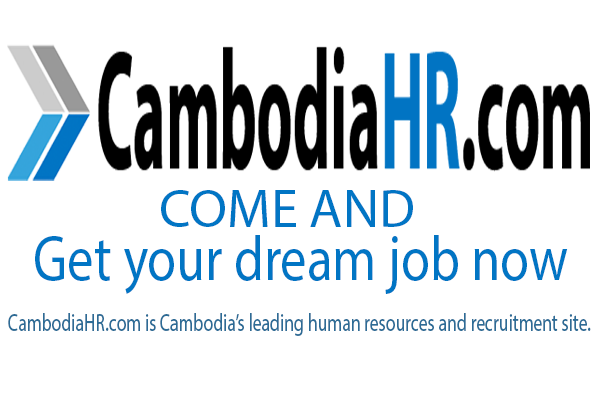
<style>
.page{position:relative;width:600px;height:400px;background:#ffffff}
.page>*{position:absolute;margin:0}
.t1{font:53.4px "MyriadPro-Regular";color:#0175c4}
.t2{font:63.5px "MyriadPro-Regular";color:#0175c4;scale:0.83 1}
.t3{font:24.7px "MyriadPro-Regular";color:#2d6c96;scale:0.72 1}
</style>
<div class="page">
<p class="t1" style="left:161px;top:190px;width:252px;height:37px">COME AND</p>
<p class="t2" style="left:35px;top:235px;width:533px;height:59px">Get your dream job now</p>
<p class="t3" style="left:8px;top:313px;width:583px;height:23px">CambodiaHR.com is Cambodia’s leading human resources and recruitment site.</p>
</div>
